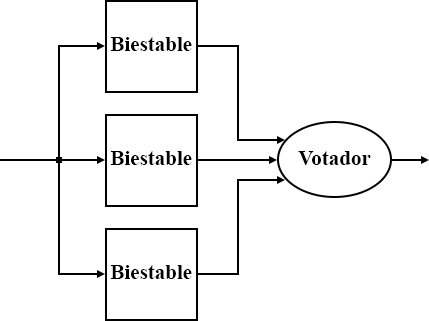
<style>
.page{position:relative;width:429px;height:321px;background:#ffffff}
.page>*{position:absolute;margin:0}
.t1{font:21px "TimesNewRomanPS-BoldMT";color:#000000}
</style>
<div class="page">
<p class="t1" style="left:110px;top:37px;width:82px;height:14px">Biestable</p>
<p class="t1" style="left:110px;top:151px;width:82px;height:14px">Biestable</p>
<p class="t1" style="left:298px;top:151px;width:73px;height:14px">Votador</p>
<p class="t1" style="left:110px;top:265px;width:82px;height:14px">Biestable</p>
</div>
